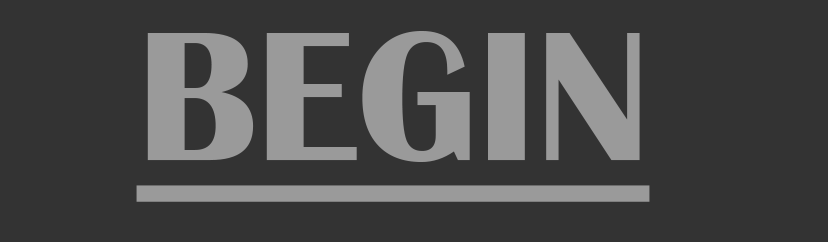
<style>
.page{position:relative;width:828px;height:242px;background:#333333}
.page>*{position:absolute;margin:0}
.t1{font:190px "BritannicBold";color:#9a9a9a;text-transform:uppercase;text-decoration:underline}
</style>
<div class="page">
<p class="t1" style="left:136px;top:31px;width:514px;height:171px">Begin</p>
</div>
